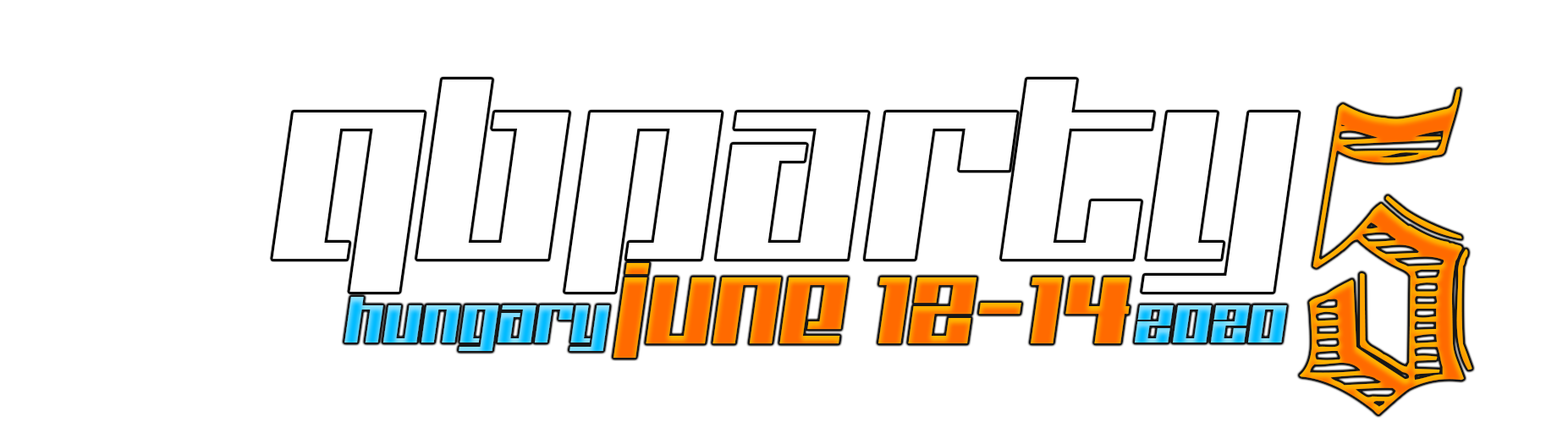
<style>
.page{position:relative;width:1568px;height:422px;background:#ffffff}
.page>*{position:absolute;margin:0}
.t1{font:407px "GrafikText"}
.t2{font:95.6px "Kitchenpolice";color:#ff6a00}
.t3{font:54.2px "Kitchenpolice"}
</style>
<div class="page">
<p class="t1" style="left:1300px;top:89px;width:172px;height:326px">5</p>
<p class="t2" style="left:613px;top:263px;width:518px;height:95px">JUNe 12-14</p>
<p class="t3" style="left:344px;top:297px;width:266px;height:54px">Hungary</p>
<p class="t3" style="left:1135px;top:305px;width:152px;height:38px">2020</p>
</div>
